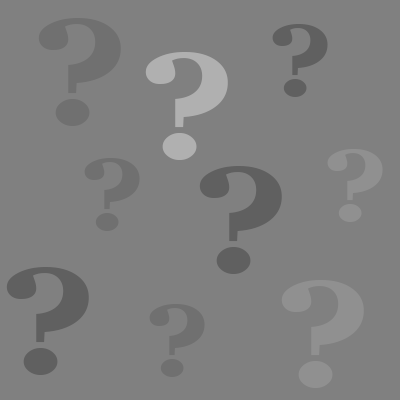
<style>
.page{position:relative;width:400px;height:400px;background:#808080}
.page>*{position:absolute;margin:0}
.t1{font:149.4px "Georgia-Bold";color:#707070;scale:1.2 1}
.t2{font:99.6px "Georgia-Bold";color:#606060;scale:1.2 1}
.t3{font:149.4px "Georgia-Bold";color:#b0b0b0;scale:1.2 1}
.t4{font:99.6px "Georgia-Bold";color:#909090;scale:1.2 1}
.t5{font:99.6px "Georgia-Bold";color:#707070;scale:1.2 1}
.t6{font:149.4px "Georgia-Bold";color:#606060;scale:1.2 1}
.t7{font:149.4px "Georgia-Bold";color:#909090;scale:1.2 1}
</style>
<div class="page">
<p class="t1" style="left:38px;top:18px;width:83px;height:108px">?</p>
<p class="t2" style="left:272px;top:24px;width:56px;height:73px">?</p>
<p class="t3" style="left:145px;top:52px;width:83px;height:108px">?</p>
<p class="t4" style="left:327px;top:149px;width:56px;height:73px">?</p>
<p class="t5" style="left:84px;top:158px;width:56px;height:73px">?</p>
<p class="t6" style="left:199px;top:166px;width:83px;height:108px">?</p>
<p class="t6" style="left:6px;top:267px;width:83px;height:108px">?</p>
<p class="t7" style="left:281px;top:280px;width:83px;height:108px">?</p>
<p class="t5" style="left:149px;top:304px;width:56px;height:73px">?</p>
</div>
